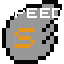
<style>
.page{position:relative;width:64px;height:64px;background:#989898}
.page>*{position:absolute;margin:0}
.t1{font:14px "Petyka-RetroComputer___SHORT";letter-spacing:0.038em;color:#ffffff}
</style>
<div class="page">
<p class="t1" style="left:2px;top:8px;width:60px;height:10px">speed</p>
</div>
